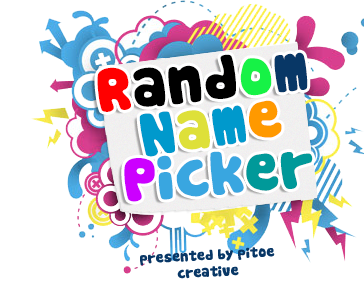
<style>
.page{position:relative;width:364px;height:292px;background:#ffffff}
.page>*{position:absolute;margin:0}
.t1{font:60px "Cookies";color:#000000}
.t2{font:60px "Cookies";color:#ff0000}
.t3{font:60px "Cookies";color:#16f246}
.t4{font:60px "Cookies";color:#083766}
.t5{font:60px "Cookies";color:#0099cc}
.t6{font:60px "Cookies";color:#dee039}
.t7{font:60px "Cookies";color:#ff9900}
.t8{font:60px "Cookies";color:#39a6e0}
.t9{font:60px "Cookies";color:#cc00ff}
.t10{font:60px "Cookies";color:#009999}
.t11{font:14px "Cookies";color:#083766}
</style>
<div class="page">
<p class="t1" style="left:97px;top:52px;width:211px;height:60px;rotate:-6deg"><span class="t2">R</span>and<span class="t3">o</span><span class="t4">m</span></p>
<p class="t5" style="left:139px;top:100px;width:143px;height:57px;rotate:-9deg">N<span class="t6">a</span>m<span class="t7">e</span></p>
<p class="t8" style="left:124px;top:151px;width:189px;height:51px;rotate:-5deg"><span class="t9">P</span>ick<span class="t10">er</span></p>
<p class="t11" style="left:140px;top:247px;width:135px;height:32px;rotate:-3deg">presented by pitoe creative</p>
</div>
